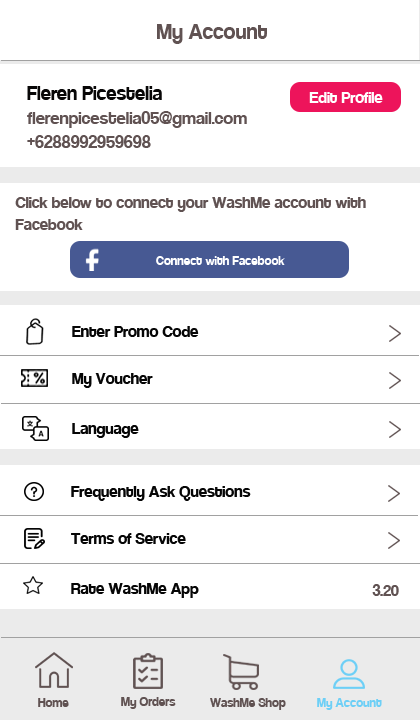
<style>
.page{position:relative;width:420px;height:720px;background:#ffffff}
.page>*{position:absolute;margin:0}
.t1{font:24px "Coolvetica-Regular";color:#605252}
.t2{font:20px "Coolvetica-Regular";color:#605252}
.t3{font:22px "Coolvetica-Regular";color:#080707}
.t4{font:18px "Coolvetica-Regular";color:#ffffff}
.t5{font:18px "Coolvetica-Regular";color:#605252}
.t6{font:14px "Coolvetica-Regular";color:#ffffff}
.t7{font:18px "Coolvetica-Regular";color:#060606}
.t8{font:14px "Coolvetica-Regular";color:#605252}
.t9{font:14px "Coolvetica-Regular";color:#6dcff6}
</style>
<div class="page">
<p class="t1" style="left:157px;top:24px;width:110px;height:20px">My Account</p>
<p class="t2" style="left:27px;top:86px;width:220px;height:62px"><span class="t3">Fleren Picestelia<br></span>flerenpicestelia05@gmail.com<br>+6288992959698</p>
<p class="t4" style="left:309px;top:92px;width:74px;height:11px">Edit Profile</p>
<p class="t5" style="left:15px;top:197px;width:351px;height:33px">Click below to connect your WashMe account with <br>Facebook</p>
<p class="t6" style="left:156px;top:256px;width:129px;height:9px">Connect with Facebook</p>
<p class="t7" style="left:72px;top:326px;width:127px;height:11px">Enter Promo Code</p>
<p class="t7" style="left:72px;top:373px;width:81px;height:15px">My Voucher</p>
<p class="t7" style="left:72px;top:423px;width:67px;height:15px">Language</p>
<p class="t7" style="left:71px;top:486px;width:180px;height:15px">Frequently Ask Questions</p>
<p class="t7" style="left:71px;top:533px;width:115px;height:11px">Terms of Service</p>
<p class="t7" style="left:71px;top:583px;width:128px;height:15px">Rate WashMe App</p>
<p class="t5" style="left:372px;top:584px;width:27px;height:12px">3.20</p>
<p class="t8" style="left:38px;top:698px;width:31px;height:9px">Home</p>
<p class="t8" style="left:121px;top:697px;width:55px;height:12px">My Orders</p>
<p class="t8" style="left:210px;top:698px;width:76px;height:12px">WashMe Shop</p>
<p class="t9" style="left:317px;top:698px;width:65px;height:12px">My Account</p>
</div>
